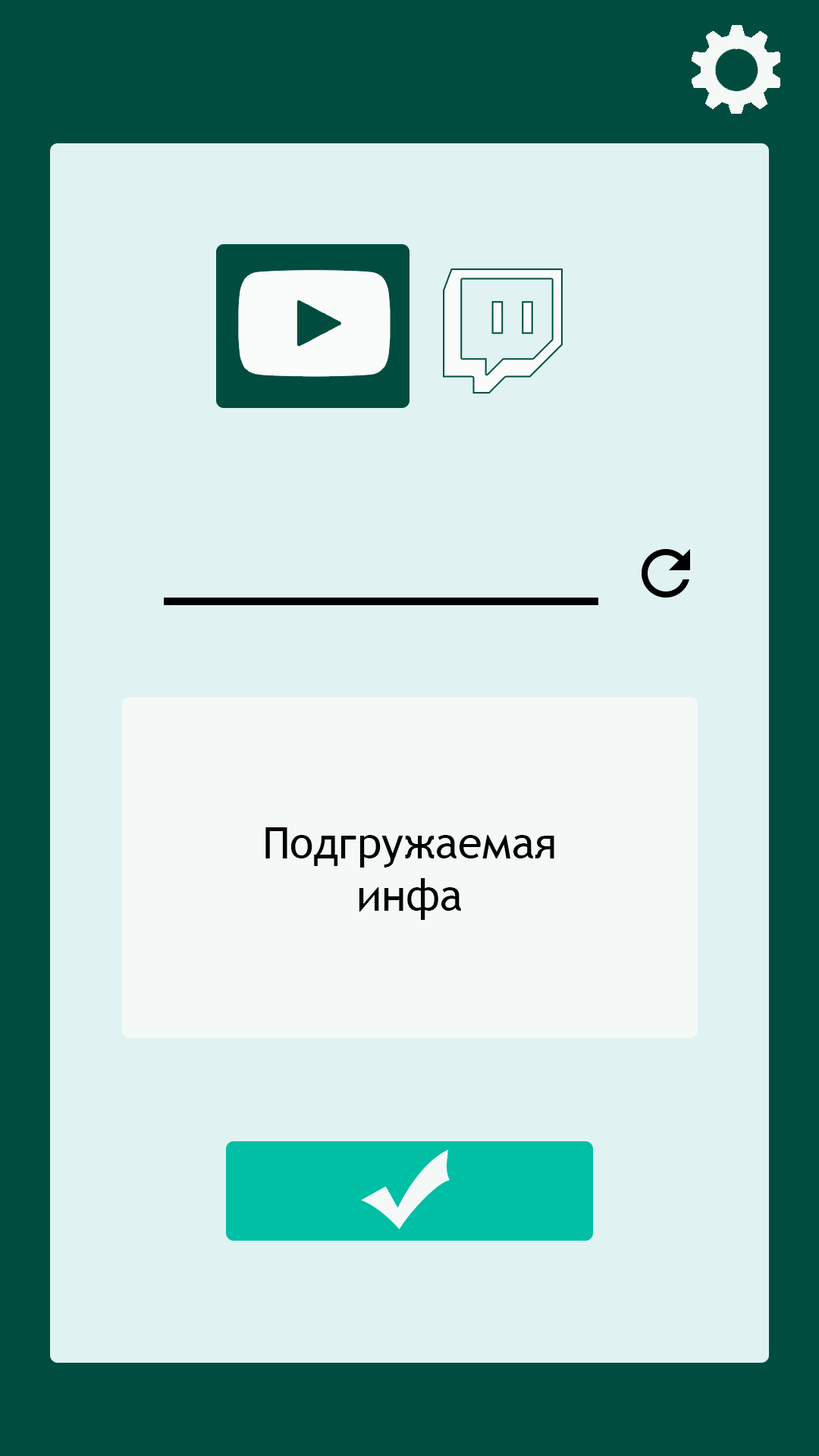
<style>
.page{position:relative;width:819px;height:1456px;background:#e0f2f1}
.page>*{position:absolute;margin:0}
.t1{font:43.6px "TrebuchetMS";color:#000000}
</style>
<div class="page">
<p class="t1" style="left:265px;top:827px;width:289px;height:93px;text-align:center">Подгружаемая инфа</p>
</div>
